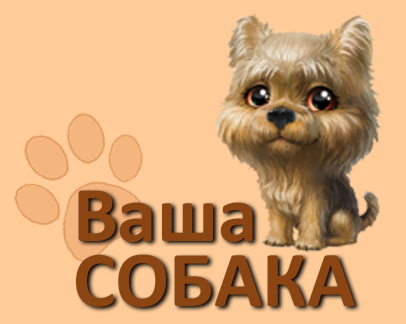
<style>
.page{position:relative;width:406px;height:324px;background:#ffcc99}
.page>*{position:absolute;margin:0}
.t1{font:80px "Calibri-Bold";color:#8b4513}
</style>
<div class="page">
<p class="t1" style="left:78px;top:190px;width:175px;height:52px">Ваша</p>
<p class="t1" style="left:76px;top:254px;width:279px;height:53px">СОБАКА</p>
</div>
